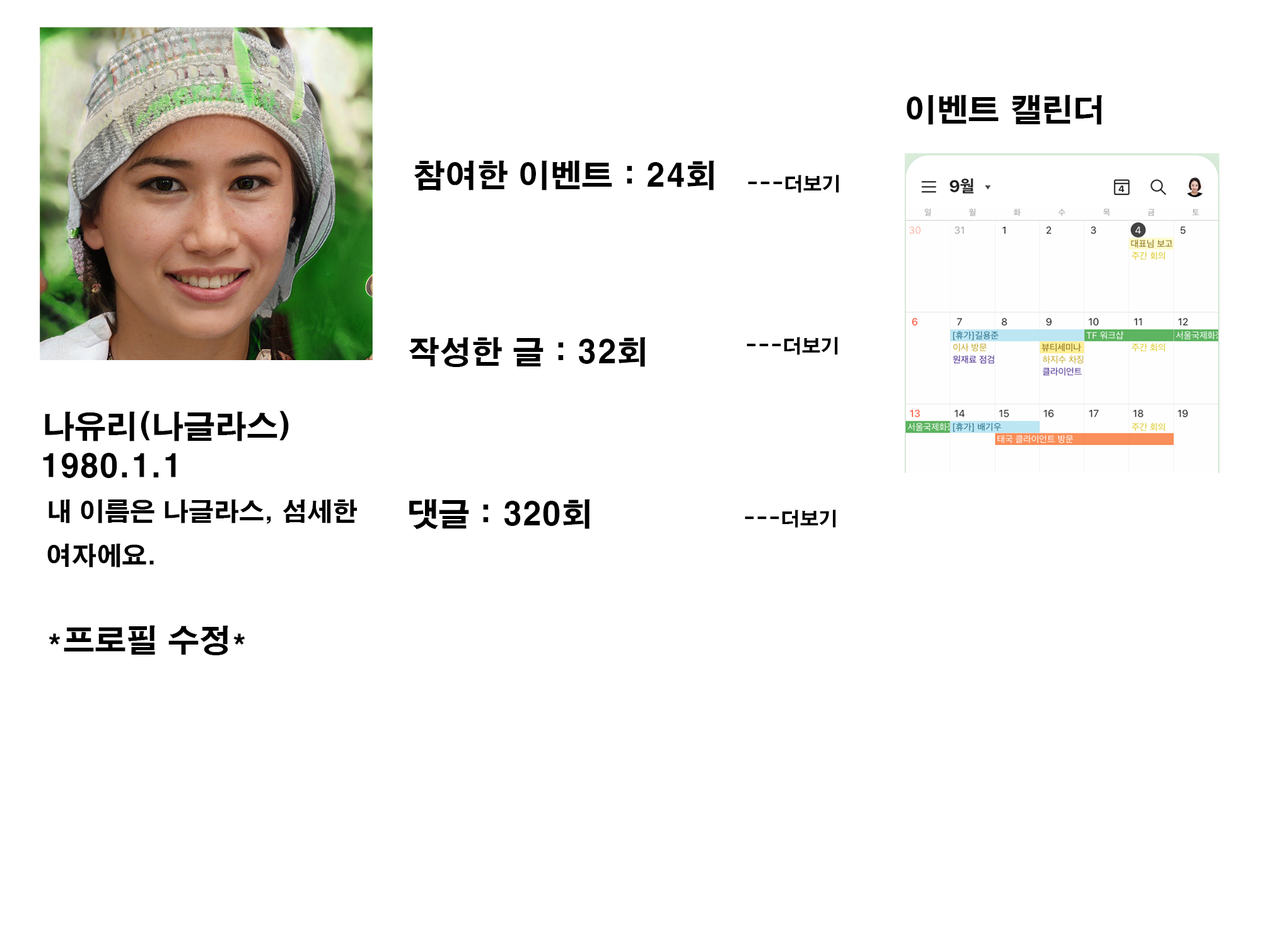
<style>
.page{position:relative;width:1261px;height:946px;background:#ffffff}
.page>*{position:absolute;margin:0}
.t1{font:31.5px "H2gtrE";color:#000000}
.t2{font:18.9px "H2gtrE";color:#000000}
.t3{font:25.2px "H2gtrE";color:#000000}
</style>
<div class="page">
<p class="t1" style="left:907px;top:95px;width:195px;height:30px">이벤트 캘린더</p>
<p class="t1" style="left:414px;top:160px;width:300px;height:30px">참여한 이벤트 : 24회</p>
<p class="t2" style="left:748px;top:175px;width:91px;height:18px">---더보기</p>
<p class="t1" style="left:409px;top:337px;width:237px;height:30px">작성한 글 : 32회</p>
<p class="t2" style="left:746px;top:337px;width:92px;height:18px">---더보기</p>
<p class="t1" style="left:45px;top:410px;width:244px;height:31px">나유리(나글라스)</p>
<p class="t1" style="left:43px;top:453px;width:133px;height:25px">1980.1.1</p>
<p class="t3" style="left:47px;top:499px;width:310px;height:68px">내 이름은 나글라스, 섬세한<br>여자에요.</p>
<p class="t1" style="left:409px;top:499px;width:181px;height:30px">댓글 : 320회</p>
<p class="t2" style="left:745px;top:509px;width:91px;height:19px">---더보기</p>
<p class="t1" style="left:49px;top:625px;width:196px;height:30px">*프로필 수정*</p>
</div>
